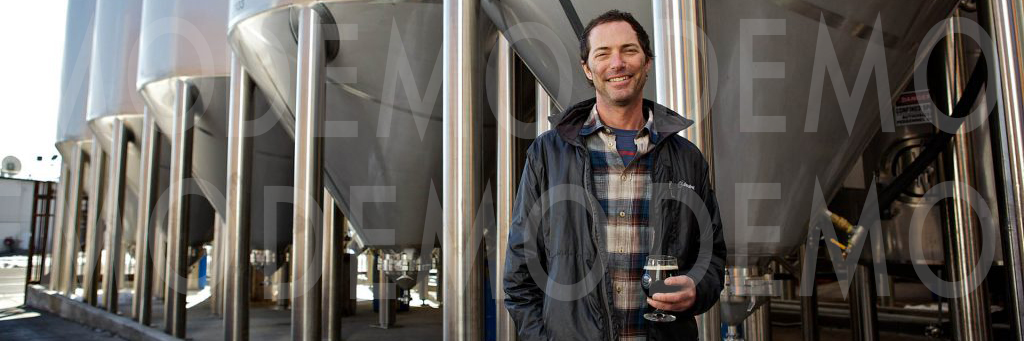
<style>
.page{position:relative;width:1024px;height:341px}
.page>*{position:absolute;margin:0}
.t1{font:150px "Futura-Medium";letter-spacing:0.05em;scale:0.73 1}
</style>
<div class="page">
<p class="t1" style="left:648px;top:174px;width:348px;height:128px">DEMO</p>
</div>
